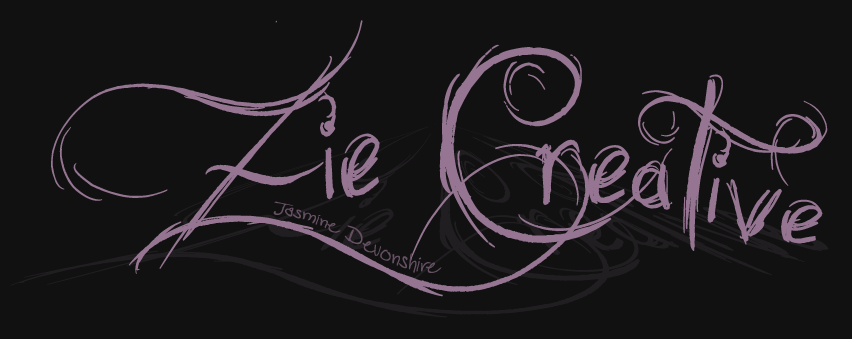
<style>
.page{position:relative;width:852px;height:339px;background:#111111}
.page>*{position:absolute;margin:0}
.t1{font:170px "Dunno";color:#957592;scale:1.2 1}
.t2{font:24px "PopStarAutograph";color:#665064;scale:1.09 1}
</style>
<div class="page">
<p class="t1" style="left:51px;top:20px;width:777px;height:277px">Zie Creative</p>
<p class="t2" style="left:273px;top:201px;width:169px;height:72px;rotate:18deg">Jasmine Devonshire</p>
</div>
